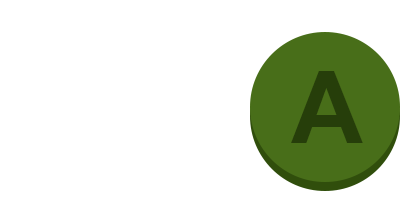
<style>
.page{position:relative;width:400px;height:200px;background:#ffffff}
.page>*{position:absolute;margin:0}
.t1{font:100px "Arial-BoldMT";color:#273f0a}
</style>
<div class="page">
<p class="t1" style="left:291px;top:71px;width:72px;height:72px">A</p>
</div>
